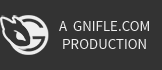
<style>
.page{position:relative;width:162px;height:70px;background:#333333}
.page>*{position:absolute;margin:0}
.t1{font:15px "SourceSansPro-Regular";color:#eeeeee}
</style>
<div class="page">
<p class="t1" style="left:59px;top:21px;width:90px;height:28px;text-align:center">A  GNIFLE.COM<br>PRODUCTION</p>
</div>
